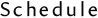
<style>
.page{position:relative;width:98px;height:18px;background:#ffffff}
.page>*{position:absolute;margin:0}
.t1{font:20px "Amira-Roman";letter-spacing:0.15em;color:#000000}
</style>
<div class="page">
<p class="t1" style="left:0px;top:1px;width:97px;height:16px;opacity:0.96">Schedule</p>
</div>
